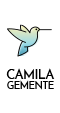
<style>
.page{position:relative;width:60px;height:113px;background:#ffffff}
.page>*{position:absolute;margin:0}
.t1{font:13.6px "JosefinSans-Regular";letter-spacing:-0.05em;color:#000000;text-transform:uppercase;scale:0.95 1}
.t2{font:10.4px "JosefinSans-Regular";letter-spacing:-0.05em;color:#000000;text-transform:uppercase;scale:0.96 1}
</style>
<div class="page">
<p class="t1" style="left:6px;top:68px;width:49px;height:11px">Camila</p>
<p class="t2" style="left:7px;top:80px;width:47px;height:10px">Gemente</p>
</div>
